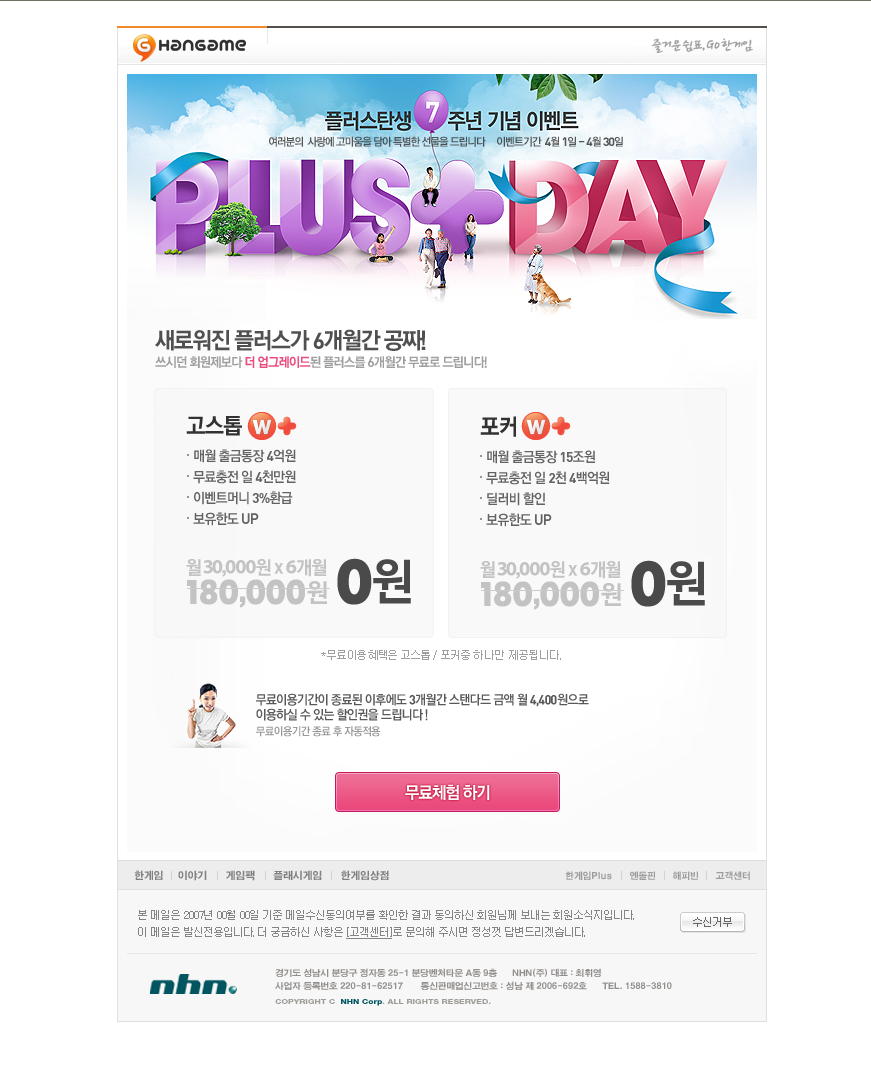
<style>
.page{position:relative;width:871px;height:1080px;background:#ffffff}
.page>*{position:absolute;margin:0}
.t1{font:11px "YGO540";letter-spacing:-0.09em;color:#4c5356}
.t2{font:11px "YGO540";letter-spacing:-0.08em;color:#545657}
.t3{font:12px "Dinbol";letter-spacing:-0.08em;color:#545657}
.t4{font:23px "YGO550";letter-spacing:-0.08em;color:#3d3d3d}
.t5{font:23px "Dinbol";letter-spacing:-0.08em;color:#3d3d3d}
.t6{font:13px "YGO550";letter-spacing:-0.08em;color:#9e9e9e}
.t7{font:13px "YGO550";letter-spacing:-0.08em;color:#ea4d7e}
.t8{font:14px "Dinbol";letter-spacing:-0.08em;color:#9e9e9e}
.t9{font:22.5px "YGO550";letter-spacing:-0.05em;color:#323232}
.t10{font:14px/21px "YGO540";letter-spacing:-0.065em;color:#626262;scale:0.96 1}
.t11{font:14px/21px "Dinbol";letter-spacing:-0.065em;color:#626262;scale:0.96 1}
.t12{font:15px/21px "Dinbol";letter-spacing:-0.065em;color:#626262;scale:0.96 1}
.t13{font:61.5px "FuturaBQ-Bold";letter-spacing:-0.04em;color:#4a4a4a;scale:0.95 1}
.t14{font:19.9px "MyriadBold";letter-spacing:-0.085em;color:#c4c3c3}
.t15{font:19px "YGO550";letter-spacing:-0.085em;color:#c4c3c3;scale:0.97 1}
.t16{font:19.9px "Helvetica75-Bold";letter-spacing:-0.085em;color:#c4c3c3}
.t17{font:49.8px "YGO550";letter-spacing:-0.08em;color:#4a4a4a}
.t18{font:33.7px "FuturaBQ-Bold";letter-spacing:-0.04em;color:#c4c3c3;scale:0.95 1}
.t19{font:33.7px "Helvetica75-Bold";letter-spacing:-0.04em;color:#c4c3c3;scale:0.95 1}
.t20{font:25.9px "YGO550";letter-spacing:-0.08em;color:#c4c3c3;scale:0.97 1}
.t21{font:11px "YDIWebDotum";color:#9e9e9e}
.t22{font:13px/14.9px "YGO540";letter-spacing:-0.07em;color:#595959;scale:0.96 1}
.t23{font:13px/14.9px "Dinbol";letter-spacing:-0.07em;color:#595959;scale:0.96 1}
.t24{font:11px "YGO540";letter-spacing:-0.06em;color:#999999;scale:0.97 1}
.t25{font:17px "YGO550";letter-spacing:-0.08em;color:#ffffff;text-transform:uppercase;scale:0.97 1}
</style>
<div class="page">
<p class="t1" style="left:269px;top:136px;width:217px;height:11px">여러분의  사랑에 고마움을 담아 특별한 선물을 드립니다</p>
<p class="t2" style="left:497px;top:136px;width:126px;height:11px">이벤트기간  <span class="t3">4</span>월 <span class="t3">1</span>일 - <span class="t3">4</span>월 <span class="t3">30</span>일</p>
<p class="t4" style="left:155px;top:329px;width:271px;height:22px;opacity:0.9">새로워진 플러스가 <span class="t5">6</span>개월간 공짜!</p>
<p class="t6" style="left:155px;top:356px;width:332px;height:12px">쓰시던 회원제보다<span class="t7"> 더 업그레이드</span>된 플러스를 <span class="t8">6</span>개월간 무료로 드립니다!</p>
<p class="t9" style="left:186px;top:416px;width:56px;height:20px">고스톱</p>
<p class="t9" style="left:480px;top:416px;width:36px;height:21px">포커</p>
<p class="t10" style="left:193px;top:449px;width:103px;height:77px">매월 출금통장 <span class="t11">4</span>억원<br>무료충전 일 <span class="t11">4</span>천만원<br>이벤트머니 <span class="t11">3%</span>환급<br>보유한도 <span class="t12">UP</span></p>
<p class="t10" style="left:486px;top:450px;width:124px;height:77px">매월 출금통장 <span class="t11">15</span>조원  <br>무료충전 일 <span class="t11">2</span>천 <span class="t11">4</span>백억원<br>딜러비 할인<br>보유한도 <span class="t12">UP</span></p>
<p class="t13" style="left:337px;top:558px;width:35px;height:47px">0</p>
<p class="t14" style="left:186px;top:559px;width:141px;height:18px"><span class="t15">월 </span>30<span class="t16">,</span>000<span class="t15">원 x </span>6<span class="t15">개월</span></p>
<p class="t17" style="left:373px;top:559px;width:38px;height:45px">원</p>
<p class="t18" style="left:187px;top:579px;width:118px;height:29px">180<span class="t19">,</span>000</p>
<p class="t20" style="left:307px;top:581px;width:20px;height:23px">원</p>
<p class="t21" style="left:321px;top:650px;width:240px;height:10px">*무료이용혜택은 고스톱/  포커중 하나만  제공됩니다.</p>
<p class="t22" style="left:256px;top:693px;width:333px;height:28px">무료이용기간이 종료된 이후에도 <span class="t23">3</span>개월간 스탠다드 금액 월 <span class="t23">4,400</span>원으로 <br>이용하실 수 있는 할인권을 드립니다 !</p>
<p class="t24" style="left:256px;top:726px;width:125px;height:11px">무료이용기간 종료 후 자동적용</p>
<p class="t25" style="left:405px;top:784px;width:85px;height:16px">무료체험 하기</p>
</div>
